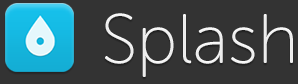
<style>
.page{position:relative;width:298px;height:84px;background:#333333}
.page>*{position:absolute;margin:0}
.t1{font:70px "MuseoSansRounded-100";color:#ffffff}
</style>
<div class="page">
<p class="t1" style="left:105px;top:13px;width:188px;height:64px">Splash</p>
</div>
